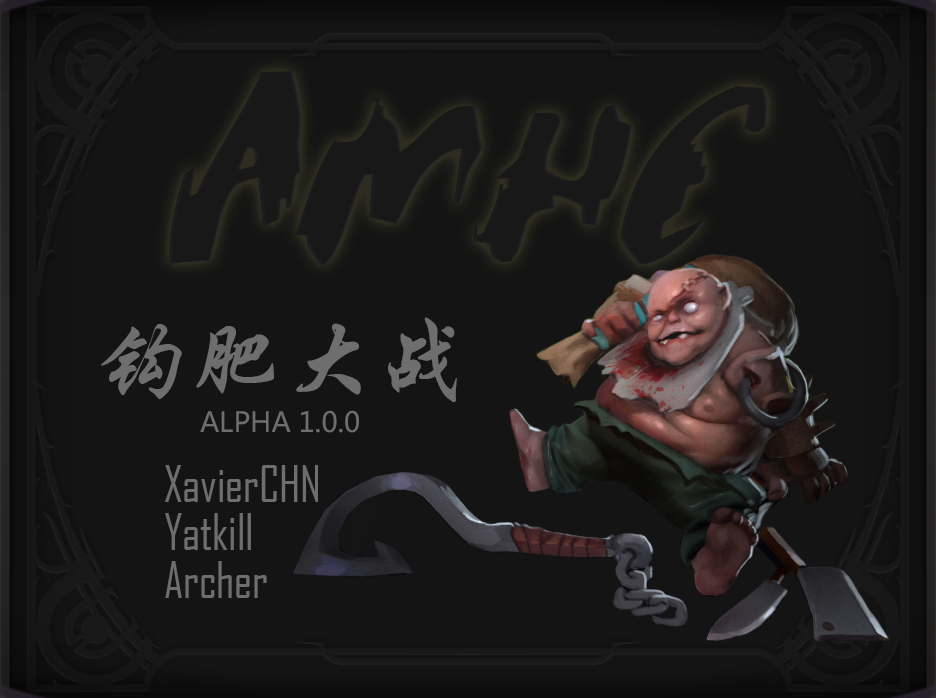
<style>
.page{position:relative;width:936px;height:698px;background:#141414}
.page>*{position:absolute;margin:0}
.t1{font:27.4px/96.5px "MicrosoftYaHei";color:#6e6e6e;text-transform:uppercase}
.t2{font:93.9px/96.5px "STXingkai";color:#6e6e6e;text-transform:uppercase;font-style:italic}
.t3{font:48.1px/48px "AgencyFB-Reg";color:#6e6e6e}
</style>
<div class="page">
<p class="t1" style="left:101px;top:317px;width:356px;height:116px;text-align:center"><span class="t2">钩肥大战<br></span>ALPHA 1.0.0</p>
<p class="t3" style="left:165px;top:465px;width:153px;height:133px">XavierCHN<br>Yatkill<br>Archer</p>
</div>
